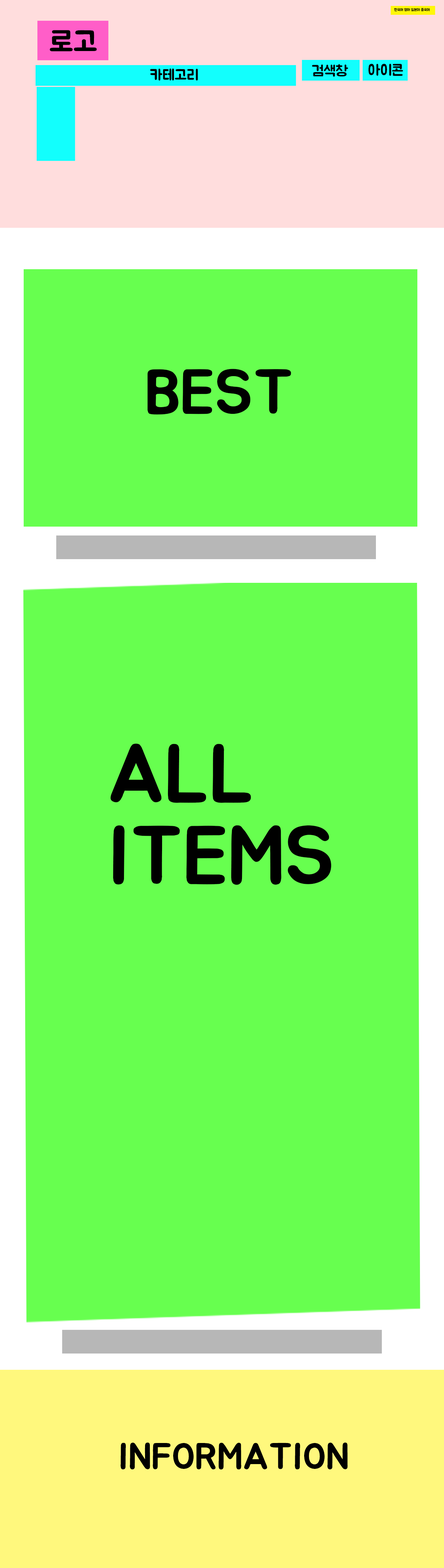
<style>
.page{position:relative;width:444px;height:1568px;background:#67ff4f}
.page>*{position:absolute;margin:0}
.t1{font:3.7px "BMJUA";color:#000000}
.t2{font:29.5px "BMJUA";color:#000000}
.t3{font:14.8px "BMJUA";color:#000000}
.t4{font:62.9px "BMJUA";color:#000000}
.t5{font:82px/82px "BMJUA";color:#000000}
.t6{font:37px "BMJUA";color:#000000}
</style>
<div class="page">
<p class="t1" style="left:394px;top:8px;width:36px;height:3px">한국어 영어 일본어 중국어</p>
<p class="t2" style="left:50px;top:30px;width:47px;height:21px">로고</p>
<p class="t3" style="left:312px;top:64px;width:36px;height:13px">검색창</p>
<p class="t3" style="left:368px;top:64px;width:35px;height:12px">아이콘</p>
<p class="t3" style="left:150px;top:68px;width:48px;height:13px">카테고리</p>
<p class="t4" style="left:147px;top:369px;width:144px;height:46px">BEST</p>
<p class="t5" style="left:110px;top:743px;width:221px;height:142px">ALL<br>ITEMS</p>
<p class="t6" style="left:121px;top:1442px;width:227px;height:28px">INFORMATION</p>
</div>
